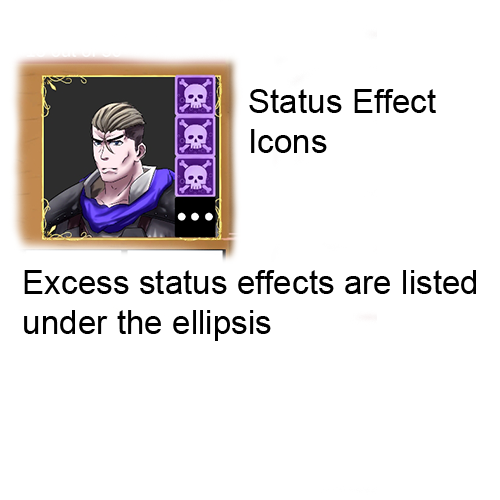
<style>
.page{position:relative;width:500px;height:500px;background:#ffffff}
.page>*{position:absolute;margin:0}
.t1{font:33.3px "ArialMT";color:#000000}
</style>
<div class="page">
<p class="t1" style="left:249px;top:89px;width:187px;height:64px">Status Effect<br>Icons</p>
<p class="t1" style="left:24px;top:270px;width:452px;height:71px">Excess status effects are listed<br>under the ellipsis</p>
</div>
